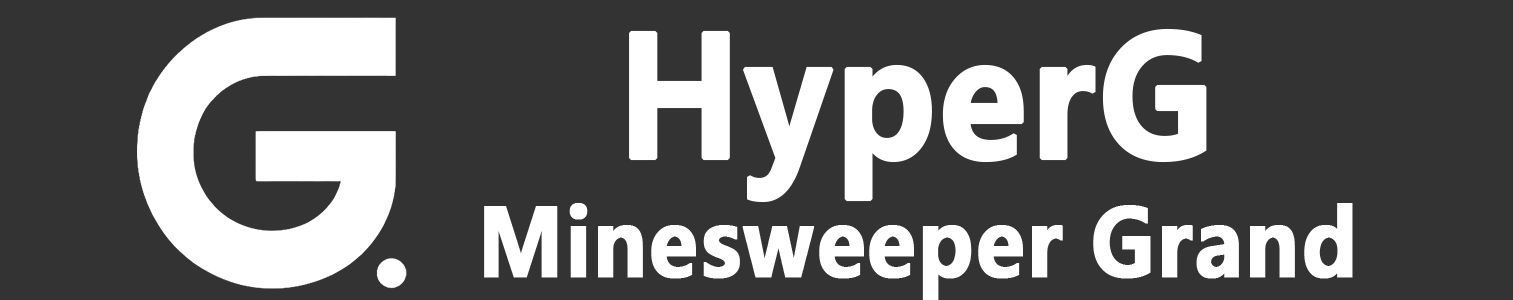
<style>
.page{position:relative;width:1513px;height:300px;background:#333333}
.page>*{position:absolute;margin:0}
.t1{font:165px "MicrosoftYaHei-Bold";color:#ffffff;font-weight:bold;scale:0.91 1}
.t2{font:91.7px "MicrosoftYaHei-Bold";color:#ffffff;font-weight:bold;scale:0.91 1}
</style>
<div class="page">
<p class="t1" style="left:629px;top:28px;width:578px;height:175px">HyperG</p>
<p class="t2" style="left:484px;top:203px;width:869px;height:98px">Minesweeper Grand</p>
</div>
